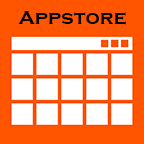
<style>
.page{position:relative;width:144px;height:144px;background:#ff5500}
.page>*{position:absolute;margin:0}
.t1{font:20.2px "CopperplateGothic-Bold";color:#000000}
</style>
<div class="page">
<p class="t1" style="left:18px;top:11px;width:108px;height:14px">Appstore</p>
</div>
